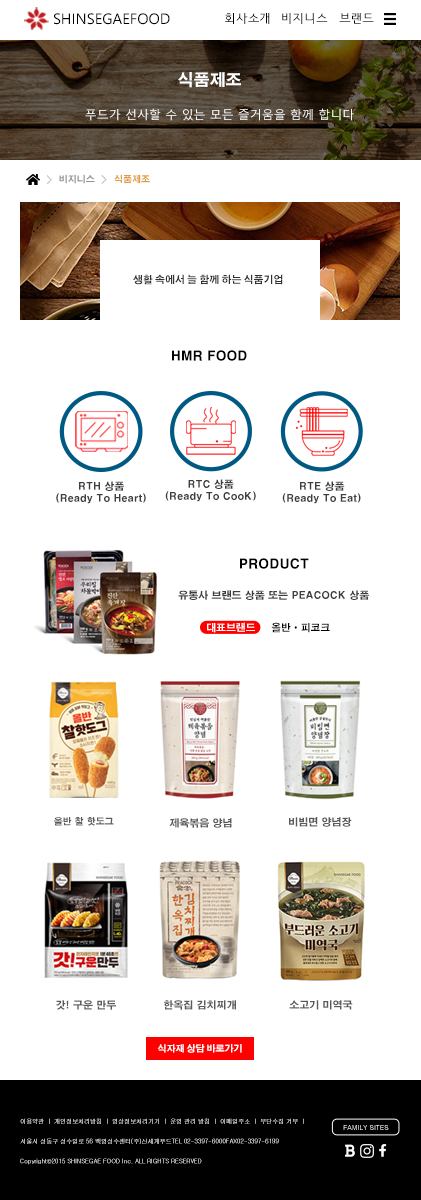
<style>
.page{position:relative;width:421px;height:1200px;background:#ffffff}
.page>*{position:absolute;margin:0}
.t1{font:15px "SegoeUISymbol";color:#000000}
.t2{font:12px "HCRDotum";color:#000000}
.t3{font:12px "HCRDotum"}
.t4{font:16px "AdobeGothicStd-Bold";color:#ffffff}
.t5{font:12px "MalgunGothic";color:#ffffff}
.t6{font:9px "H2gtrE";color:#929292}
.t7{font:12px "H2gtrE";color:#c5c5c5}
.t8{font:9px "H2gtrE";color:#df9e46}
.t9{font:10px "AdobeGothicStd-Bold";color:#333232}
.t10{font:13px "H2gtrE";color:#000000}
.t11{font:10px "H2gtrE";color:#3e3c3c}
.t12{font:9.8px "AdobeGothicStd-Bold";color:#ffffff}
.t13{font:9.8px "AdobeGothicStd-Bold";color:#000000}
.t14{font:9px "H2gtrE";color:#5c5959}
.t15{font:10px "H2gtrE";color:#5c5959}
.t16{font:9px "AdobeGothicStd-Bold";color:#ffffff}
.t17{font:6px/20px "Gulim"}
.t18{font:6.9px "Gulim"}
</style>
<div class="page">
<p class="t1" style="left:54px;top:13px;width:116px;height:12px">SHINSEGAEFOOD</p>
<p class="t2" style="left:225px;top:13px;width:45px;height:11px">회사소개</p>
<p class="t3" style="left:282px;top:13px;width:46px;height:11px">비지니스</p>
<p class="t2" style="left:339px;top:13px;width:35px;height:11px">브랜드</p>
<p class="t4" style="left:178px;top:72px;width:63px;height:16px">식품제조</p>
<p class="t5" style="left:85px;top:108px;width:269px;height:13px">푸드가 선사할 수 있는 모든 즐거움을 함께 합니다</p>
<p class="t6" style="left:59px;top:174px;width:36px;height:10px">비지니스</p>
<p class="t7" style="left:101px;top:174px;width:6px;height:10px">&gt;</p>
<p class="t8" style="left:114px;top:174px;width:36px;height:10px">식품제조</p>
<p class="t7" style="left:46px;top:175px;width:6px;height:10px">&gt;</p>
<p class="t9" style="left:133px;top:274px;width:150px;height:11px">생활 속에서 늘 함께 하는 식품기업</p>
<p class="t10" style="left:172px;top:350px;width:75px;height:11px">HMR FOOD</p>
<p class="t11" style="left:56px;top:481px;width:90px;height:23px;text-align:center">RTH 상품<br>(Ready To Heart)</p>
<p class="t11" style="left:165px;top:479px;width:91px;height:23px;text-align:center">RTC 상품<br>(Ready To CooK)</p>
<p class="t11" style="left:282px;top:481px;width:79px;height:23px;text-align:center">RTE 상품<br>(Ready To Eat)</p>
<p class="t10" style="left:240px;top:558px;width:69px;height:11px">PRODUCT</p>
<p class="t11" style="left:178px;top:590px;width:191px;height:10px">유통사 브랜드 상품 또는 PEACOCK 상품</p>
<p class="t12" style="left:207px;top:622px;width:48px;height:11px">대표브랜드</p>
<p class="t13" style="left:271px;top:622px;width:59px;height:11px">올반•피코크</p>
<p class="t14" style="left:54px;top:817px;width:60px;height:9px">올반 찰 핫도그</p>
<p class="t15" style="left:169px;top:818px;width:63px;height:10px">제육볶음 양념</p>
<p class="t15" style="left:289px;top:817px;width:63px;height:10px">비빔면 양념장</p>
<p class="t15" style="left:56px;top:1000px;width:60px;height:10px">갓! 구운 만두</p>
<p class="t15" style="left:164px;top:1000px;width:72px;height:10px">한옥집 김치찌개</p>
<p class="t15" style="left:289px;top:1000px;width:64px;height:10px">소고기 미역국</p>
<p class="t16" style="left:157px;top:1044px;width:85px;height:9px">식자재 상담 바로가기</p>
<p class="t17" style="left:20px;top:1118px;width:284px;height:47px">이용약관 ㅣ 개인정보처리방침 ㅣ 영상정보처리기기 ㅣ 운영 관리 방침 ㅣ 이메일주소 ㅣ 무단수집 거부 ㅣ <br>서울시 성동구 성수일로 56 백영성수센터(주)신세계푸드TEL 02-3397-6000FAX02-3397-6199<br>Copyright©2015 SHINSEGAE FOOD Inc. ALL RIGHTS RESERVED</p>
<p class="t18" style="left:343px;top:1125px;width:46px;height:5px">FAMILY SITES</p>
</div>
